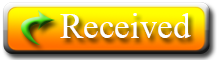
<style>
.page{position:relative;width:220px;height:60px}
.page>*{position:absolute;margin:0}
.t1{font:35px "TimesNewRomanPSMT";color:#ffffff}
</style>
<div class="page">
<p class="t1" style="left:60px;top:13px;width:131px;height:25px">Received</p>
</div>
